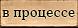
<style>
.page{position:relative;width:78px;height:28px}
.page>*{position:absolute;margin:0}
.t1{font:12.8px "CooperMediumCBT";letter-spacing:0.04em;color:#000000}
</style>
<div class="page">
<p class="t1" style="left:2px;top:10px;width:73px;height:10px">в процессе</p>
</div>
